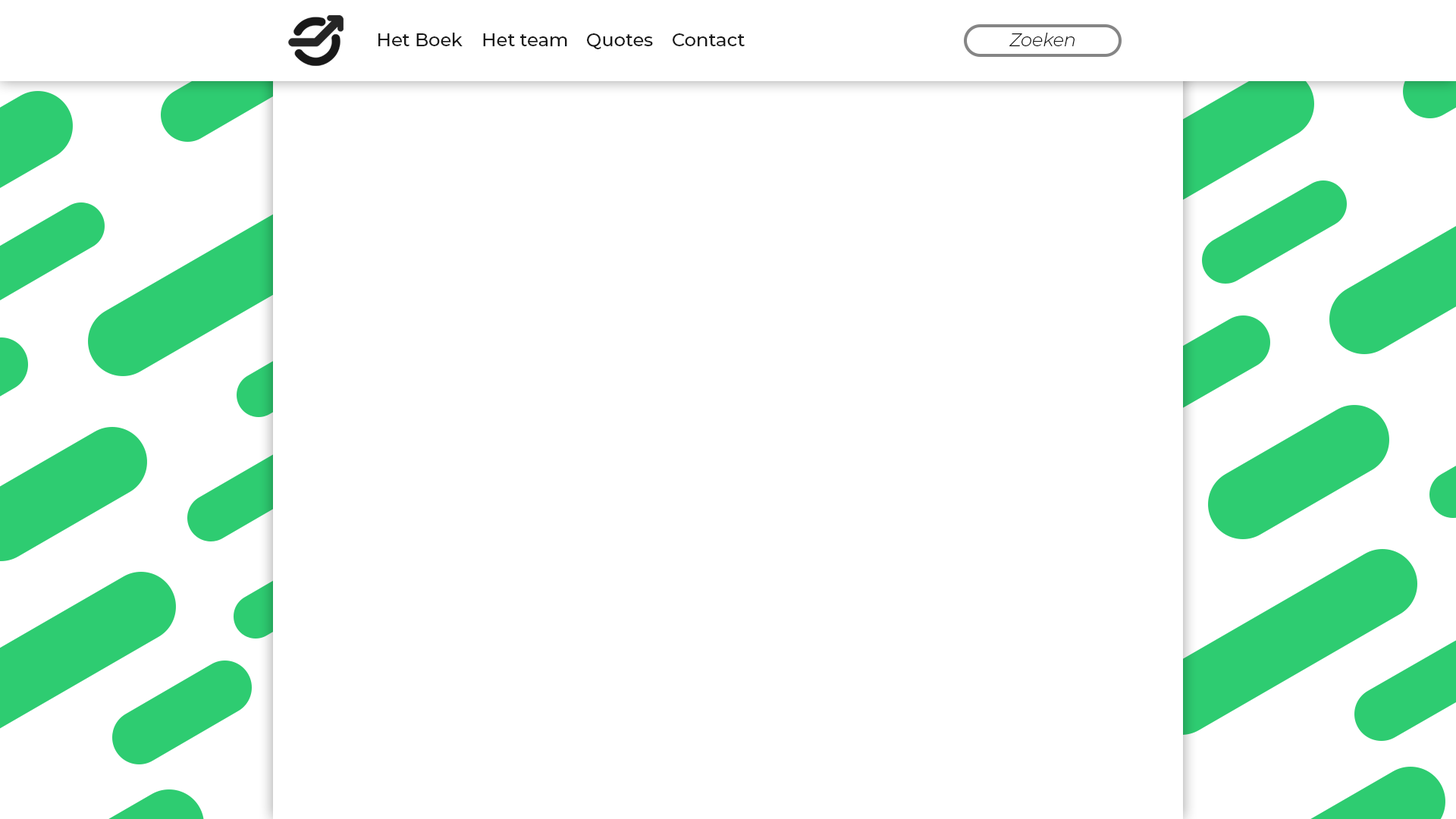
<style>
.page{position:relative;width:1456px;height:819px;background:#ffffff}
.page>*{position:absolute;margin:0}
.t1{font:18.2px "Montserrat-Medium";color:#191919}
.t2{font:18.2px "Montserrat-LightItalic";color:#191919}
</style>
<div class="page">
<p class="t1" style="left:378px;top:33px;width:85px;height:13px">Het Boek</p>
<p class="t1" style="left:483px;top:33px;width:84px;height:13px">Het team</p>
<p class="t1" style="left:587px;top:33px;width:66px;height:16px">Quotes</p>
<p class="t1" style="left:673px;top:33px;width:72px;height:13px">Contact</p>
<p class="t2" style="left:1009px;top:33px;width:66px;height:13px">Zoeken</p>
</div>
